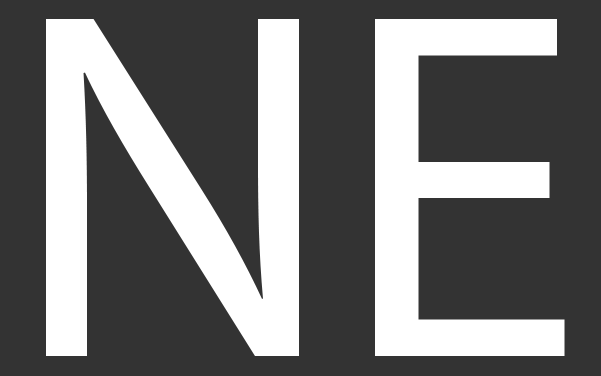
<style>
.page{position:relative;width:601px;height:376px;background:#333333}
.page>*{position:absolute;margin:0}
.t1{font:500px "MyriadPro-Regular";color:#ffffff}
</style>
<div class="page">
<p class="t1" style="left:46px;top:19px;width:519px;height:337px">NE</p>
</div>
